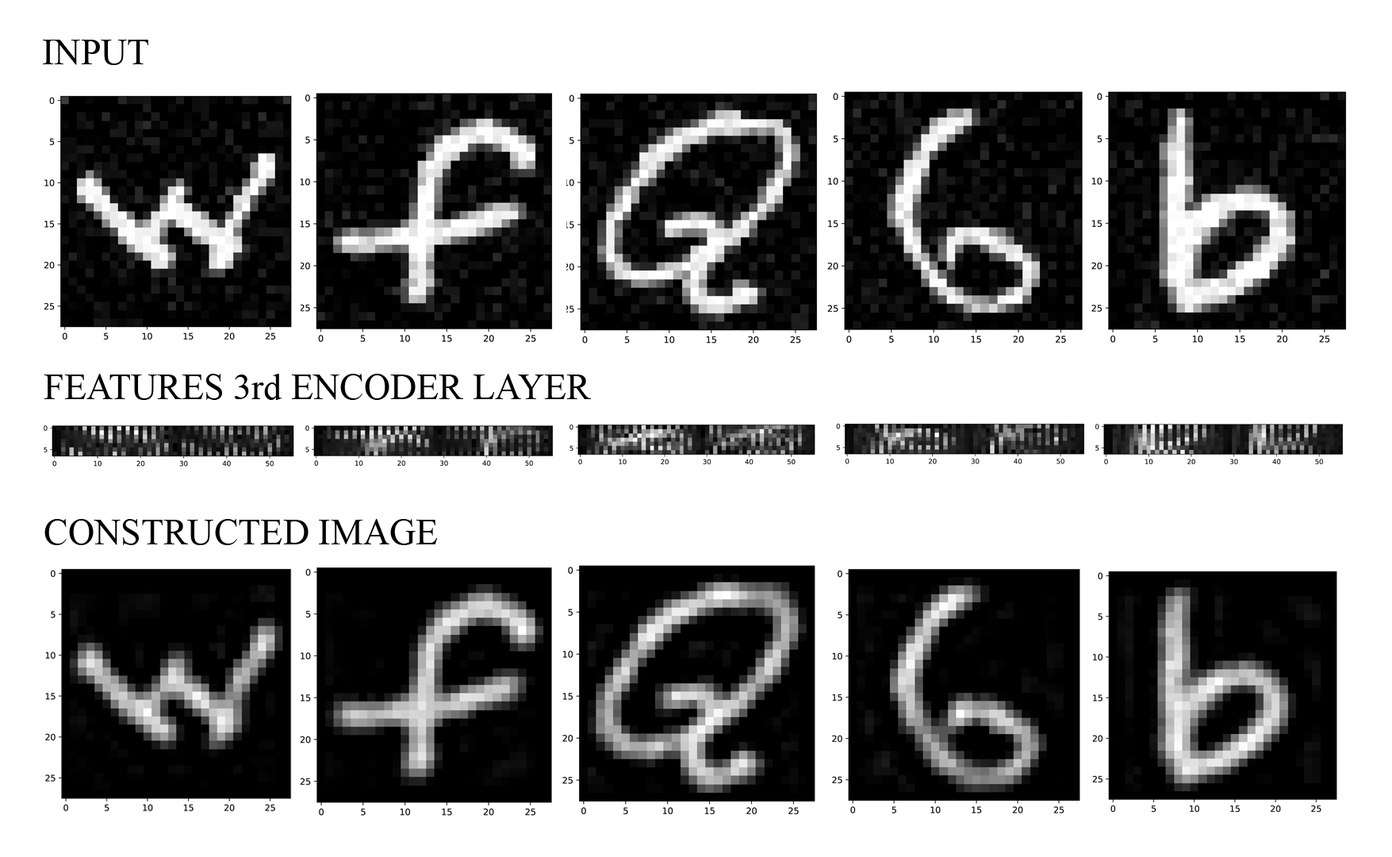
<style>
.page{position:relative;width:1392px;height:857px;background:#ffffff}
.page>*{position:absolute;margin:0}
.t1{font:36.5px "TimesNewRomanPSMT";color:#000000}
</style>
<div class="page">
<p class="t1" style="left:43px;top:40px;width:105px;height:25px">INPUT</p>
<p class="t1" style="left:44px;top:374px;width:547px;height:26px">FEATURES 3rd ENCODER LAYER</p>
<p class="t1" style="left:44px;top:519px;width:394px;height:26px">CONSTRUCTED IMAGE</p>
</div>
